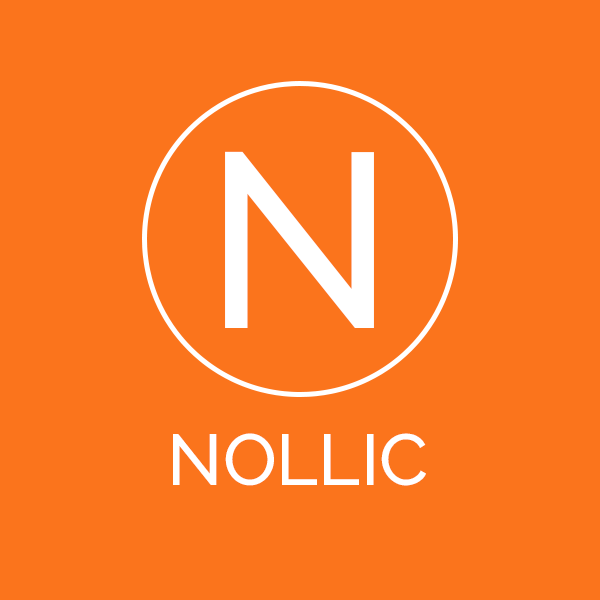
<style>
.page{position:relative;width:600px;height:600px;background:#fb741c}
.page>*{position:absolute;margin:0}
.t1{font:248.3px "Raleway-Medium";color:#ffffff}
.t2{font:72px "Raleway-Medium";color:#ffffff}
</style>
<div class="page">
<p class="t1" style="left:225px;top:151px;width:149px;height:177px">N</p>
<p class="t2" style="left:173px;top:433px;width:253px;height:53px">NOLLIC</p>
</div>
